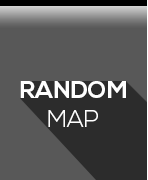
<style>
.page{position:relative;width:148px;height:180px;background:#585858}
.page>*{position:absolute;margin:0}
.t1{font:23.9px "NexaBold";color:#ffffff}
.t2{font:23.9px "NexaLight";color:#ffffff}
</style>
<div class="page">
<p class="t1" style="left:20px;top:81px;width:106px;height:46px;text-align:center">RANDOM<br><span class="t2">MAP</span></p>
</div>
